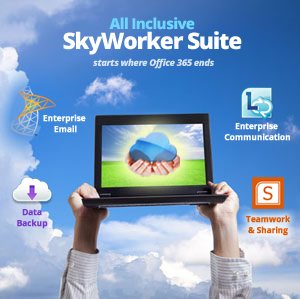
<style>
.page{position:relative;width:300px;height:299px}
.page>*{position:absolute;margin:0}
.t1{font:22.6px/20.4px "OpenSans-Extrabold";letter-spacing:-0.05em;color:#ffffff}
.t2{font:15.1px/20.4px "OpenSans-Extrabold";letter-spacing:-0.05em;color:#6dd8ff}
.t3{font:9.5px "OpenSans-ExtraboldItalic";letter-spacing:-0.05em;color:#d6e3f3}
.t4{font:8.6px/10.9px "OpenSans-Bold";letter-spacing:-0.05em;color:#ffffff;font-weight:bold}
.t5{font:8.6px/10.9px "OpenSans-Bold";letter-spacing:-0.05em;color:#7a3bcd;font-weight:bold}
.t6{font:8.6px/10.9px "OpenSans-Bold";letter-spacing:-0.05em;color:#dd5a04;font-weight:bold}
</style>
<div class="page">
<p class="t1" style="left:63px;top:17px;width:179px;height:38px;text-align:center"><span class="t2">All Inclusive<br></span>SkyWorker Suite</p>
<p class="t3" style="left:93px;top:58px;width:121px;height:11px">starts where Office 365 ends</p>
<p class="t4" style="left:43px;top:114px;width:43px;height:19px;text-align:center">Enterprise <br>Email</p>
<p class="t4" style="left:224px;top:122px;width:66px;height:19px;text-align:center">Enterprise <br>Communication</p>
<p class="t5" style="left:17px;top:209px;width:31px;height:20px;text-align:center">Data<br>Backup</p>
<p class="t6" style="left:246px;top:215px;width:45px;height:21px;text-align:center">Teamwork<br>&amp; Sharing</p>
</div>
